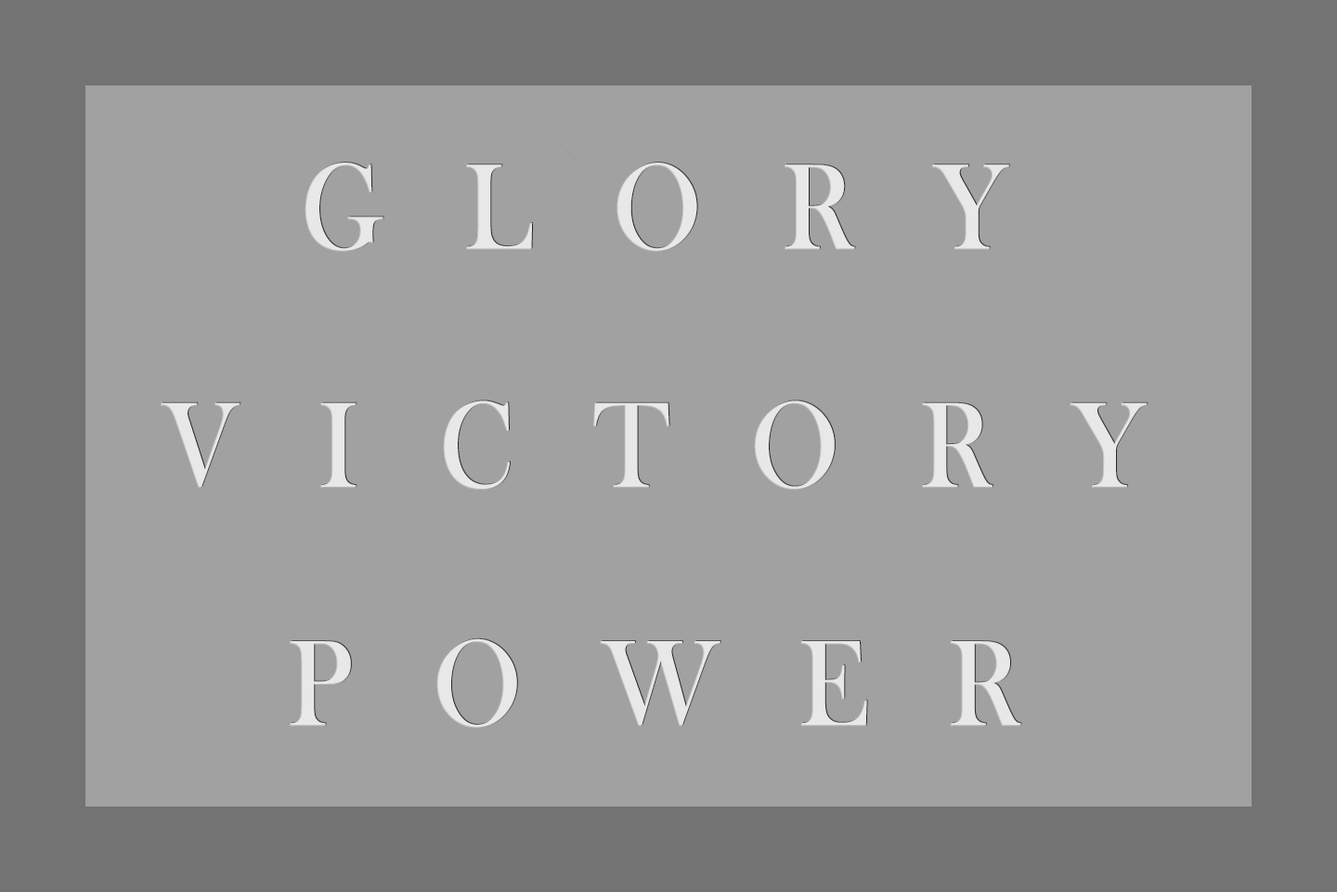
<style>
.page{position:relative;width:1337px;height:892px;background:#a1a1a1}
.page>*{position:absolute;margin:0}
.t1{font:125.1px/238.1px "BaskOldFace";letter-spacing:0.74em;color:#e8e8e8;scale:0.88 1}
</style>
<div class="page">
<p class="t1" style="left:162px;top:163px;width:986px;height:564px;text-align:center">GLORY<br>VICTORY<br>POWER</p>
</div>
